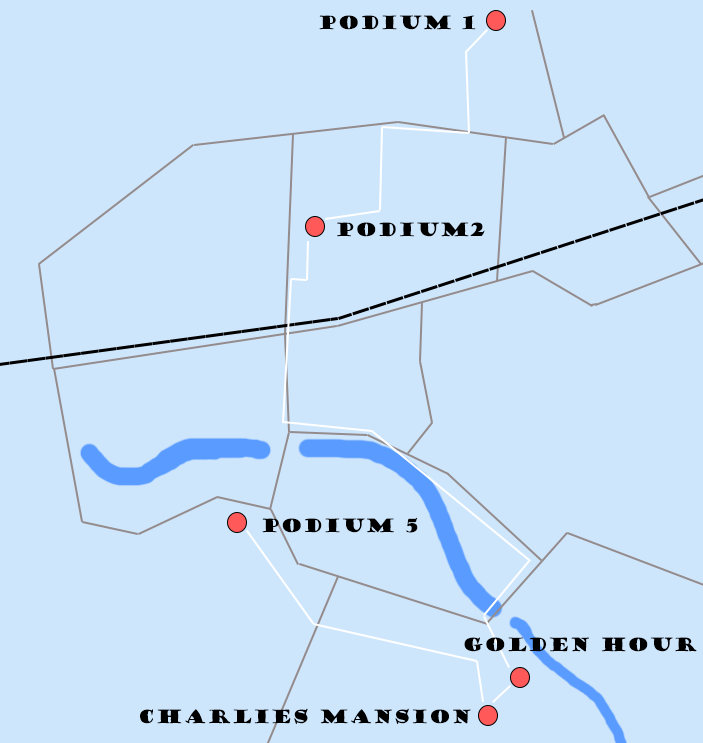
<style>
.page{position:relative;width:703px;height:743px;background:#cee6fc}
.page>*{position:absolute;margin:0}
.t1{font:18px "GoudyStout";color:#000000}
</style>
<div class="page">
<p class="t1" style="left:319px;top:15px;width:157px;height:15px">podium 1</p>
<p class="t1" style="left:337px;top:222px;width:148px;height:15px">podium2</p>
<p class="t1" style="left:262px;top:517px;width:156px;height:16px">podium 5</p>
<p class="t1" style="left:464px;top:637px;width:233px;height:15px">Golden Hour</p>
<p class="t1" style="left:140px;top:708px;width:331px;height:16px">Charlies Mansion</p>
</div>
